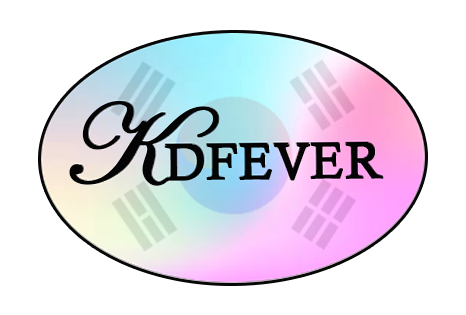
<style>
.page{position:relative;width:466px;height:315px;background:#ffffff}
.page>*{position:absolute;margin:0}
.t1{font:50.2px "CalistoMT";color:#040404;text-transform:uppercase;font-weight:bold}
.t2{font:112.9px "EdwardianScriptITC";color:#040404;text-transform:uppercase;font-weight:bold}
</style>
<div class="page">
<p class="t1" style="left:69px;top:100px;width:315px;height:86px;rotate:-1deg"><span class="t2">k</span>dfever</p>
</div>
